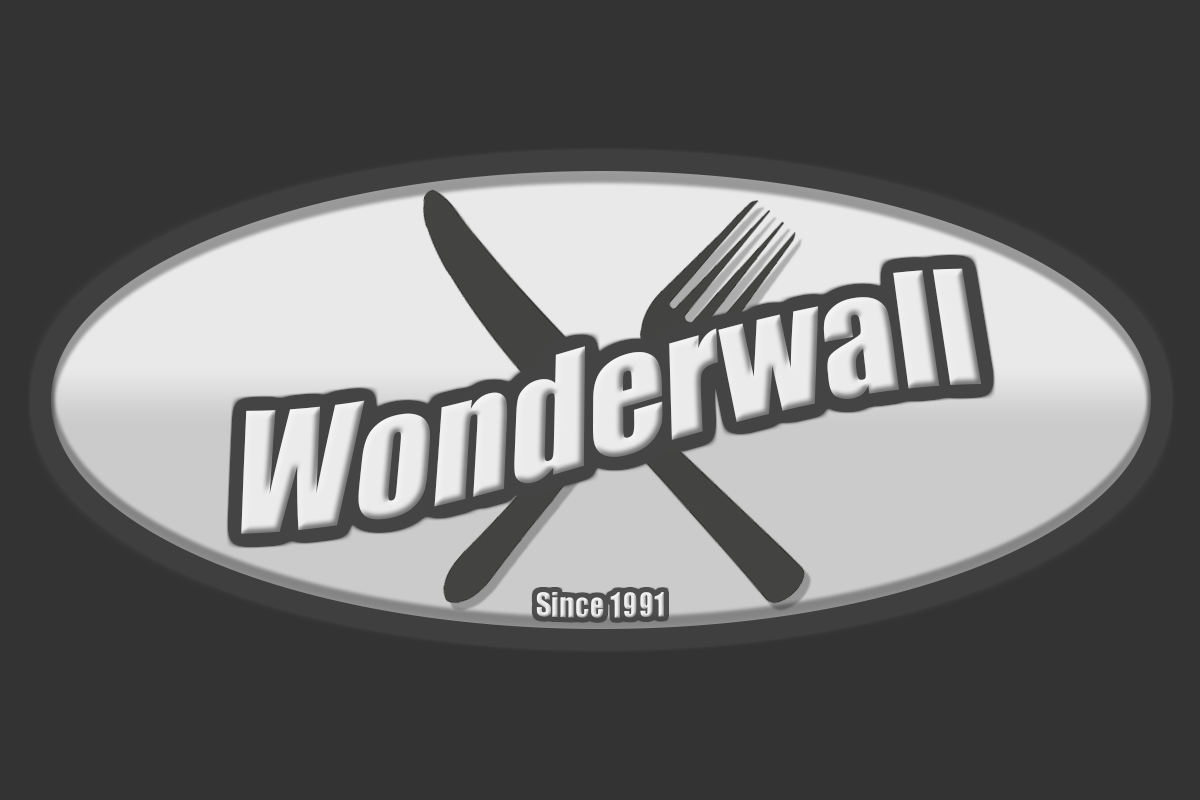
<style>
.page{position:relative;width:1200px;height:800px;background:#333333}
.page>*{position:absolute;margin:0}
.t1{font:150px "Impact";color:#ebebeb}
.t2{font:30px "Impact";color:#ebebeb}
</style>
<div class="page">
<p class="t1" style="left:241px;top:268px;width:741px;height:266px">Wonderwall</p>
<p class="t2" style="left:536px;top:592px;width:128px;height:26px">Since 1991</p>
</div>
